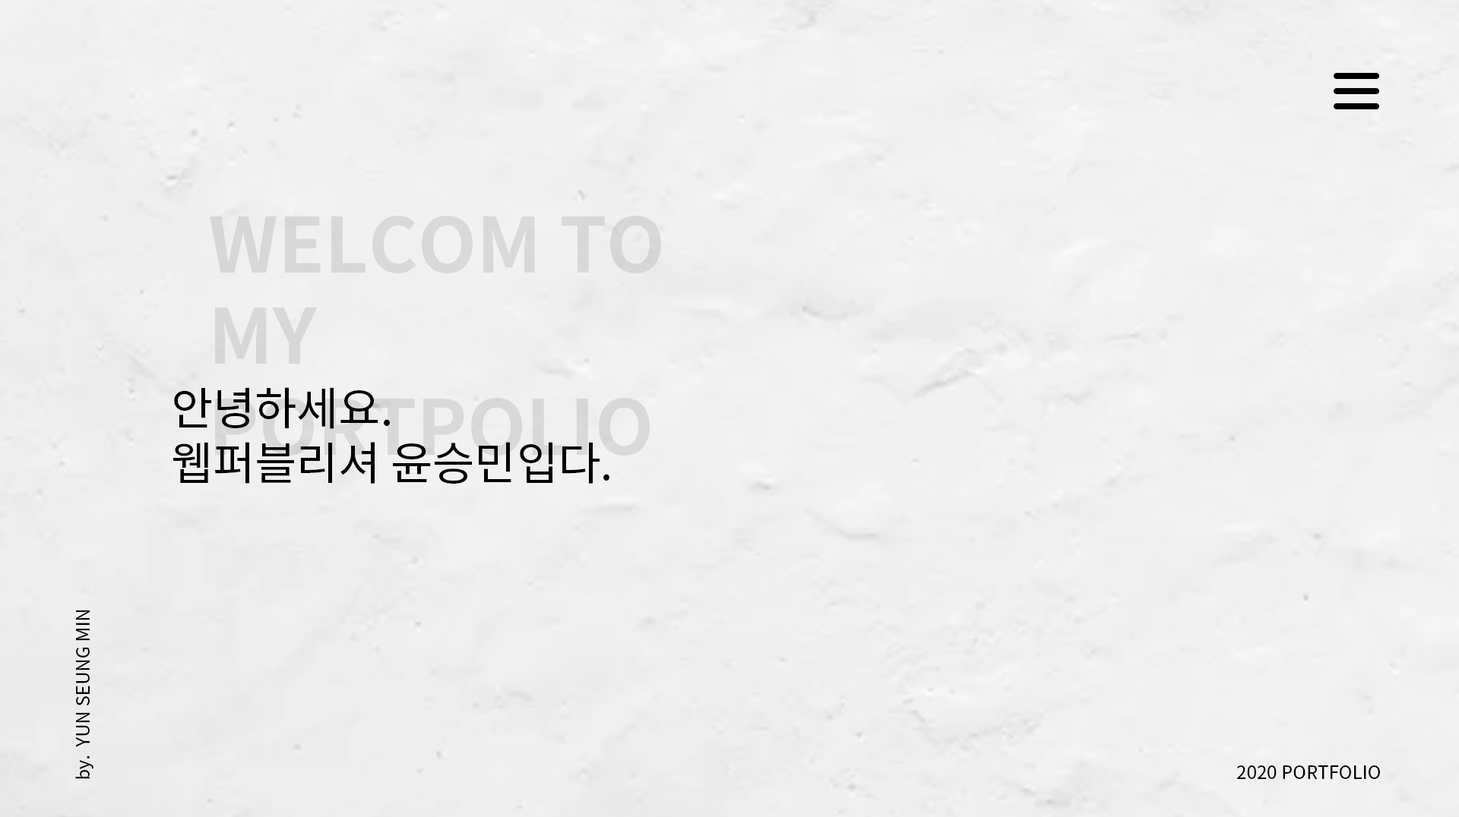
<style>
.page{position:relative;width:1459px;height:817px}
.page>*{position:absolute;margin:0}
.t1{font:45.6px "NotoSansKR-Regular";color:#000000}
.t2{font:18.2px "NotoSansKR-Regular";color:#000000}
</style>
<div class="page">
<p class="t1" style="left:172px;top:387px;width:437px;height:97px">안녕하세요.<br>웹퍼블리셔 윤승민입다.</p>
<p class="t2" style="left:75px;top:610px;width:18px;height:169px;rotate:-90deg">by.  YUN SEUNG MIN</p>
<p class="t2" style="left:1237px;top:766px;width:143px;height:13px">2020 PORTFOLIO</p>
</div>
